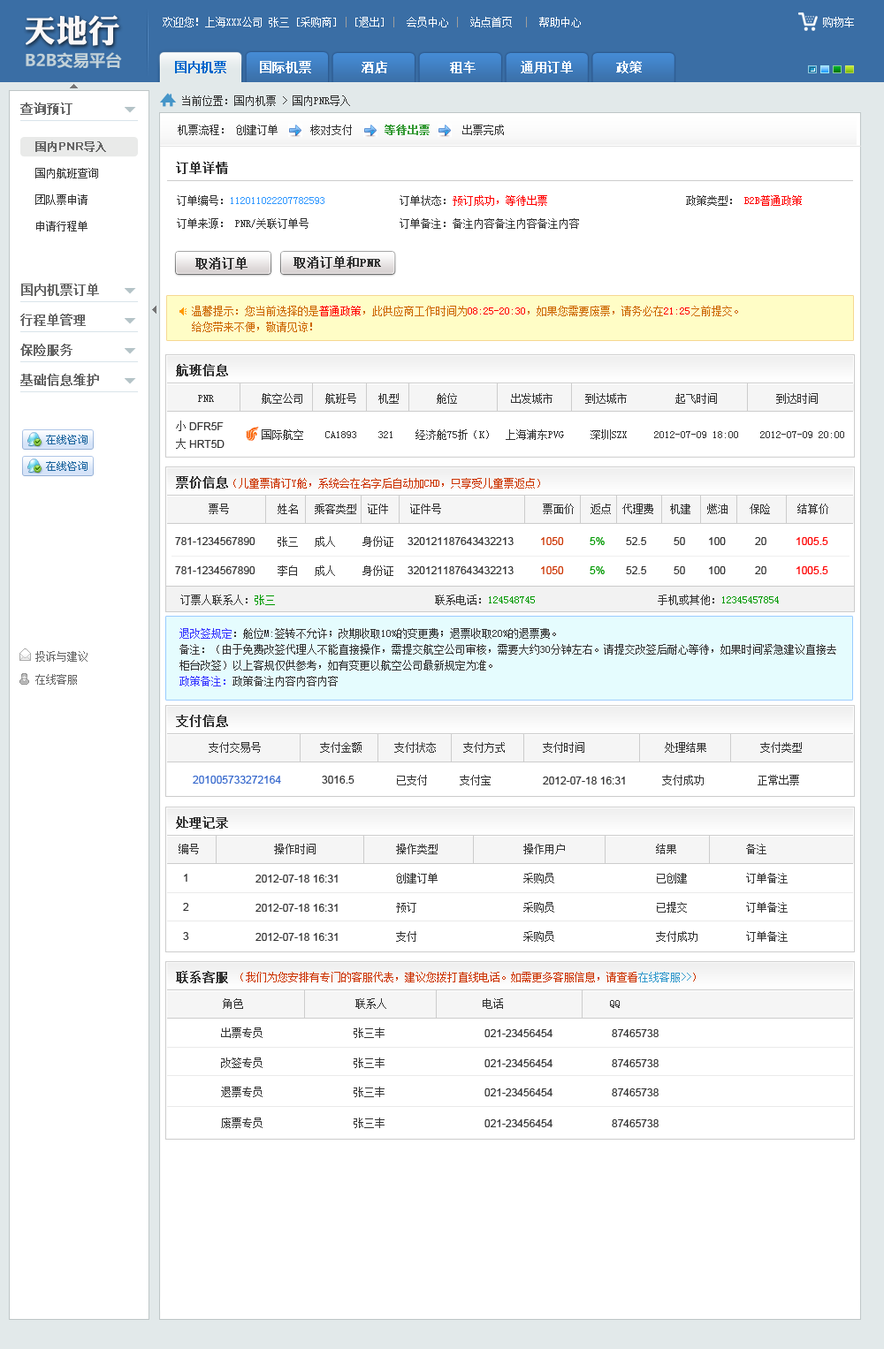
<style>
.page{position:relative;width:884px;height:1349px;background:#ffffff}
.page>*{position:absolute;margin:0}
.t1{font:32px "DFPLiJinHeiW8";color:#faf7f7}
.t2{font:10.6px "SimSun";color:#ffffff}
.t3{font:10.6px "SimSun";color:#9e9e9e}
.t4{font:16.2px "MicrosoftYaHei-Bold";color:#c2d1d8}
.t5{font:12.4px "SimSun";color:#ffffff;font-weight:bold}
.t6{font:12.4px "SimSun";color:#0066cc;font-weight:bold}
.t7{font:10.6px "SimSun";color:#333333}
.t8{font:12.4px "SimSun";color:#666666;font-weight:bold}
.t9{font:10.6px "SimSun";color:#339933;font-weight:bold}
.t10{font:10.6px "ArialMT";color:#666666;font-weight:bold}
.t11{font:10.6px "SimSun";color:#666666;font-weight:bold}
.t12{font:12.4px "SimSun";color:#333333;font-weight:bold}
.t13{font:10.6px/26.5px "SimSun";color:#333333}
.t14{font:10.6px/23px "SimSun";color:#333333}
.t15{font:10.6px/23px "SimSun";color:#3399ff}
.t16{font:10.6px/23px "SimSun";color:#ff0000}
.t17{font:10.6px/15.9px "SimSun";color:#cc6600}
.t18{font:10.6px/15.9px "SimSun";color:#ff0000}
.t19{font:10.6px "ArialMT";color:#333333}
.t20{font:10.6px "SimSun";color:#cc3300}
.t21{font:10.6px "ArialMT";color:#cc3300}
.t22{font:10.6px "ArialMT";color:#009900}
.t23{font:10.6px "ArialMT";color:#ff0000}
.t24{font:10.6px "SimSun";color:#009900}
.t25{font:10.6px/15.9px "SimSun";color:#333333}
.t26{font:10.6px/15.9px "SimSun";color:#3333ff}
.t27{font:10.6px/23px "SimSun";color:#666666}
.t28{font:10.6px "ArialMT";color:#3366cc}
.t29{font:10.6px "SimSun";color:#3399cc}
</style>
<div class="page">
<p class="t1" style="left:25px;top:15px;width:94px;height:31px">天地行</p>
<p class="t2" style="left:163px;top:17px;width:418px;height:10px">欢迎您！上海XXX公司 张三 [采购商]<span class="t3"> | </span>[退出] <span class="t3">|</span>  会员中心 <span class="t3">|</span>  站点首页  <span class="t3">|</span>  帮助中心</p>
<p class="t2" style="left:823px;top:17px;width:31px;height:10px">购物车</p>
<p class="t4" style="left:26px;top:52px;width:96px;height:17px">B2B交易平台</p>
<p class="t5" style="left:175px;top:61px;width:467px;height:12px"><span class="t6">国内机票</span>    国际机票     酒店     租车     通用订单      政策</p>
<p class="t7" style="left:182px;top:95px;width:168px;height:11px">当前位置：国内机票 &gt; 国内PNR导入</p>
<p class="t8" style="left:20px;top:103px;width:52px;height:12px">查询预订</p>
<p class="t7" style="left:178px;top:125px;width:46px;height:10px">机票流程：</p>
<p class="t7" style="left:236px;top:125px;width:268px;height:10px">创建订单      核对支付      <span class="t9">等待出票</span>      出票完成</p>
<p class="t10" style="left:35px;top:141px;width:71px;height:11px"><span class="t11">国内</span>PNR<span class="t11">导入</span></p>
<p class="t12" style="left:176px;top:162px;width:52px;height:12px">订单详情</p>
<p class="t13" style="left:35px;top:168px;width:63px;height:64px">国内航班查询<br>团队票申请<br>申请行程单</p>
<p class="t14" style="left:177px;top:195px;width:625px;height:34px">订单编号：<span class="t15">112011022207782593</span>   订单状态：<span class="t16">预订成功，等待出票          </span>政策类型： <span class="t16">B2B普通政策 </span>      <br>订单来源： PNR/关联订单号   订单备注：备注内容备注内容备注内容</p>
<p class="t12" style="left:195px;top:257px;width:52px;height:13px">取消订单</p>
<p class="t12" style="left:293px;top:256px;width:88px;height:13px">取消订单和PNR</p>
<p class="t8" style="left:21px;top:284px;width:78px;height:12px">国内机票订单</p>
<p class="t17" style="left:192px;top:306px;width:546px;height:26px">温馨提示：您当前选择的是<span class="t18">普通政策</span>，此供应商工作时间为<span class="t18">08:25-20:30</span>，如果您需要废票，请务必在<span class="t18">21:25</span>之前提交。<br>给您带来不便，敬请见谅！</p>
<p class="t8" style="left:20px;top:314px;width:66px;height:12px">行程单管理</p>
<p class="t8" style="left:20px;top:344px;width:52px;height:12px">保险服务</p>
<p class="t12" style="left:176px;top:364px;width:52px;height:12px">航班信息</p>
<p class="t8" style="left:20px;top:374px;width:79px;height:12px">基础信息维护</p>
<p class="t7" style="left:198px;top:393px;width:619px;height:11px">PNR       航空公司    航班号    机型       舱位          出发城市      到达城市         起飞时间          到达时间</p>
<p class="t7" style="left:176px;top:421px;width:10px;height:10px">小</p>
<p class="t19" style="left:189px;top:422px;width:35px;height:8px">DFR5F</p>
<p class="t7" style="left:262px;top:429px;width:582px;height:11px">国际航空    CA1893    321    经济舱75折（K）  上海浦东PVG     深圳SZX     2012-07-09 18:00    2012-07-09 20:00</p>
<p class="t7" style="left:176px;top:438px;width:10px;height:11px">大</p>
<p class="t19" style="left:189px;top:440px;width:35px;height:8px">HRT5D</p>
<p class="t12" style="left:176px;top:476px;width:52px;height:13px">票价信息</p>
<p class="t20" style="left:233px;top:478px;width:307px;height:11px">（儿童票请订Y舱，系统会在名字后自动加CHD，只享受儿童票返点）</p>
<p class="t7" style="left:209px;top:504px;width:619px;height:10px">票号   姓名   乘客类型  证件    证件号           票面价 返点 代理费   机建   燃油    保险     结算价</p>
<p class="t19" style="left:175px;top:537px;width:80px;height:8px">781-1234567890</p>
<p class="t7" style="left:277px;top:536px;width:116px;height:11px">张三   成人     身份证</p>
<p class="t19" style="left:407px;top:537px;width:106px;height:8px">320121187643432213</p>
<p class="t21" style="left:541px;top:537px;width:23px;height:8px">1050</p>
<p class="t22" style="left:589px;top:537px;width:15px;height:8px">5%</p>
<p class="t19" style="left:626px;top:537px;width:20px;height:8px">52.5</p>
<p class="t19" style="left:673px;top:537px;width:12px;height:8px">50</p>
<p class="t19" style="left:709px;top:537px;width:17px;height:8px">100</p>
<p class="t19" style="left:755px;top:537px;width:11px;height:8px">20</p>
<p class="t23" style="left:796px;top:537px;width:32px;height:8px">1005.5</p>
<p class="t19" style="left:175px;top:566px;width:80px;height:8px">781-1234567890</p>
<p class="t7" style="left:277px;top:566px;width:116px;height:10px">李白   成人     身份证</p>
<p class="t19" style="left:407px;top:566px;width:106px;height:8px">320121187643432213</p>
<p class="t21" style="left:541px;top:566px;width:23px;height:8px">1050</p>
<p class="t22" style="left:589px;top:566px;width:15px;height:8px">5%</p>
<p class="t19" style="left:626px;top:566px;width:20px;height:8px">52.5</p>
<p class="t19" style="left:673px;top:566px;width:12px;height:8px">50</p>
<p class="t19" style="left:709px;top:566px;width:17px;height:8px">100</p>
<p class="t19" style="left:755px;top:566px;width:11px;height:8px">20</p>
<p class="t23" style="left:796px;top:566px;width:32px;height:8px">1005.5</p>
<p class="t24" style="left:180px;top:595px;width:599px;height:10px"><span class="t7">订票人联系人：</span>张三        <span class="t7">联系电话：</span>124548745       <span class="t7">手机或其他：</span>12345457854</p>
<p class="t25" style="left:179px;top:628px;width:657px;height:59px"><span class="t26">退改签规定</span>：舱位M:签转不允许；改期收取10%的变更费；退票收取20%的退票费。<br>备注：（由于免费改签代理人不能直接操作，需提交航空公司审核，需要大约30分钟左右。请提交改签后耐心等待，如果时间紧急建议直接去<br>柜台改签）以上客规仅供参考，如有变更以航空公司最新规定为准。<br><span class="t26">政策备注：</span>政策备注内容内容内容</p>
<p class="t27" style="left:35px;top:651px;width:52px;height:34px">投诉与建议 <br>在线客服</p>
<p class="t12" style="left:176px;top:715px;width:52px;height:12px">支付信息</p>
<p class="t7" style="left:209px;top:742px;width:593px;height:11px">支付交易号     支付金额      支付状态     支付方式    支付时间          处理结果    支付类型</p>
<p class="t28" style="left:193px;top:776px;width:88px;height:8px">201005733272164</p>
<p class="t19" style="left:322px;top:776px;width:32px;height:8px">3016.5</p>
<p class="t7" style="left:397px;top:775px;width:93px;height:11px">已支付 支付宝</p>
<p class="t19" style="left:543px;top:777px;width:82px;height:8px">2012-07-18 16:31</p>
<p class="t7" style="left:662px;top:775px;width:137px;height:11px">支付成功  正常出票</p>
<p class="t12" style="left:176px;top:817px;width:52px;height:12px">处理记录</p>
<p class="t7" style="left:179px;top:844px;width:587px;height:11px">编号    操作时间       操作类型       操作用户   结果       备注</p>
<p class="t19" style="left:184px;top:874px;width:3px;height:8px">1</p>
<p class="t19" style="left:255px;top:875px;width:83px;height:8px">2012-07-18 16:31</p>
<p class="t7" style="left:396px;top:873px;width:391px;height:11px">创建订单   采购员    已创建    订单备注</p>
<p class="t19" style="left:183px;top:903px;width:6px;height:8px">2</p>
<p class="t19" style="left:255px;top:904px;width:83px;height:8px">2012-07-18 16:31</p>
<p class="t7" style="left:396px;top:902px;width:391px;height:11px">预订    采购员    已提交    订单备注</p>
<p class="t19" style="left:183px;top:932px;width:6px;height:8px">3</p>
<p class="t19" style="left:255px;top:933px;width:83px;height:8px">2012-07-18 16:31</p>
<p class="t7" style="left:396px;top:931px;width:391px;height:11px">支付    采购员    支付成功    订单备注</p>
<p class="t12" style="left:176px;top:971px;width:52px;height:13px">联系客服</p>
<p class="t20" style="left:240px;top:972px;width:455px;height:11px">（我们为您安排有专门的客服代表，建议您拨打直线电话。如需更多客服信息，请查看<span class="t29">在线客服&gt;&gt;</span>）</p>
<p class="t7" style="left:223px;top:999px;width:396px;height:10px">角色      联系人        电话     QQ</p>
<p class="t7" style="left:221px;top:1028px;width:163px;height:10px">出票专员    张三丰</p>
<p class="t19" style="left:484px;top:1029px;width:174px;height:8px">021-23456454  87465738</p>
<p class="t7" style="left:221px;top:1058px;width:163px;height:10px">改签专员    张三丰</p>
<p class="t19" style="left:484px;top:1060px;width:174px;height:7px">021-23456454  87465738</p>
<p class="t7" style="left:221px;top:1087px;width:163px;height:11px">退票专员    张三丰</p>
<p class="t19" style="left:484px;top:1089px;width:174px;height:8px">021-23456454  87465738</p>
<p class="t7" style="left:221px;top:1118px;width:163px;height:10px">废票专员    张三丰</p>
<p class="t19" style="left:484px;top:1120px;width:174px;height:8px">021-23456454  87465738</p>
</div>
